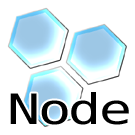
<style>
.page{position:relative;width:135px;height:135px;background:#ffffff}
.page>*{position:absolute;margin:0}
.t1{font:42px "BitstreamVeraSansMono-Roman";letter-spacing:-0.06em;color:#000000;scale:1.31 1}
</style>
<div class="page">
<p class="t1" style="left:10px;top:92px;width:119px;height:33px">Node</p>
</div>
